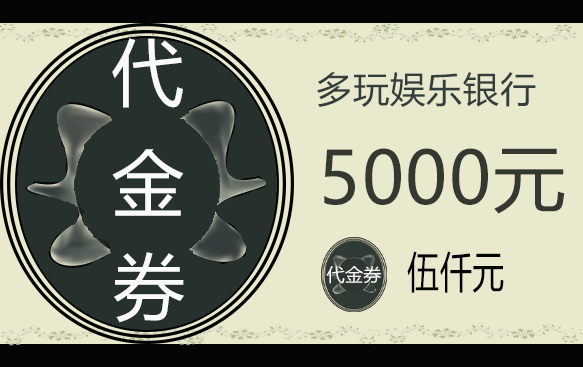
<style>
.page{position:relative;width:583px;height:367px;background:#e9e9cd}
.page>*{position:absolute;margin:0}
.t1{font:72px "MicrosoftYaHei";letter-spacing:0.02em;color:#fbfbfb}
.t2{font:36px "MicrosoftYaHei";letter-spacing:0.02em;color:#333d3c}
.t3{font:72px "MicrosoftYaHei";letter-spacing:0.02em;color:#353831}
.t4{font:43.1px "MicrosoftYaHei";letter-spacing:0.02em;color:#020202;scale:0.74 1}
.t5{font:18px "MicrosoftYaHei";letter-spacing:0.02em;color:#fcfafa}
</style>
<div class="page">
<p class="t1" style="left:112px;top:38px;width:71px;height:70px">代</p>
<p class="t2" style="left:317px;top:72px;width:219px;height:35px">多玩娱乐银行</p>
<p class="t1" style="left:112px;top:149px;width:72px;height:67px">金</p>
<p class="t3" style="left:324px;top:148px;width:241px;height:66px">5000元</p>
<p class="t1" style="left:114px;top:252px;width:70px;height:71px">券</p>
<p class="t4" style="left:407px;top:251px;width:97px;height:42px">伍仟元</p>
<p class="t5" style="left:326px;top:266px;width:55px;height:18px">代金券</p>
</div>
